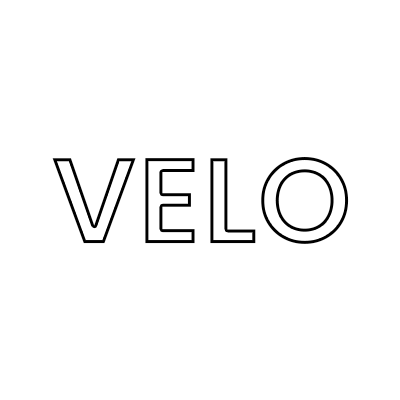
<style>
.page{position:relative;width:400px;height:400px;background:#ffffff}
.page>*{position:absolute;margin:0}
.t1{font:121.4px "Poppins-SemiBold";color:#ffffff}
</style>
<div class="page">
<p class="t1" style="left:52px;top:157px;width:297px;height:87px">VELO</p>
</div>
